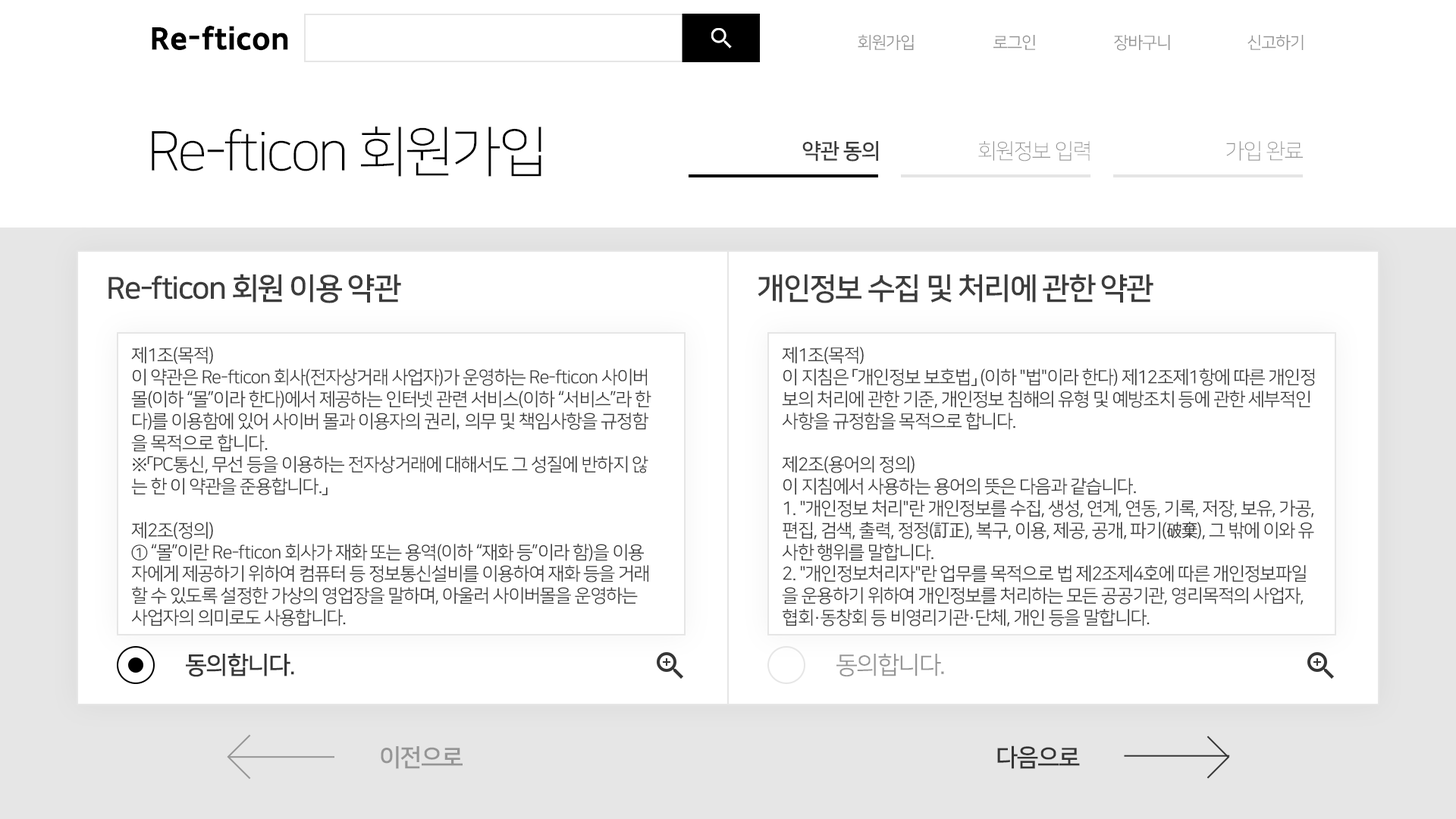
<style>
.page{position:relative;width:1456px;height:819px;background:#ffffff}
.page>*{position:absolute;margin:0}
.t1{font:30.3px "SDGothicNeoc-gExBd";color:#000000}
.t2{font:16.7px "NanumSquareOTFR";letter-spacing:-0.05em;color:#959595}
.t3{font:54.6px "NanumSquareOTFL";letter-spacing:-0.05em;color:#000000}
.t4{font:21.2px "NanumSquareOTFB";letter-spacing:-0.05em;color:#3c3c3c}
.t5{font:21.2px "NanumSquareOTFL";letter-spacing:-0.05em;color:#959595}
.t6{font:30.3px "NanumSquareOTFB";letter-spacing:-0.05em;color:#3c3c3c}
.t7{font:18.2px "NanumSquareOTFR";letter-spacing:-0.05em;color:#3c3c3c}
.t8{font:18.2px "AppleGothic";letter-spacing:-0.05em;color:#3c3c3c}
.t9{font:18.2px "NanumBarunGothic";letter-spacing:-0.05em;color:#3c3c3c}
.t10{font:24.3px "NanumSquareOTFB";letter-spacing:-0.05em;color:#353535}
.t11{font:24.3px "NanumSquareOTFR";letter-spacing:-0.05em;color:#959595}
.t12{font:24.3px "NanumSquareOTFB";letter-spacing:-0.05em;color:#959595}
.t13{font:24.4px "NanumSquareOTFB";letter-spacing:-0.05em;color:#353535}
</style>
<div class="page">
<p class="t1" style="left:152px;top:26px;width:136px;height:25px">Re-fticon</p>
<p class="t2" style="left:858px;top:34px;width:56px;height:16px">회원가입</p>
<p class="t2" style="left:993px;top:35px;width:42px;height:15px">로그인</p>
<p class="t2" style="left:1114px;top:35px;width:56px;height:16px">장바구니</p>
<p class="t2" style="left:1247px;top:35px;width:57px;height:15px">신고하기</p>
<p class="t3" style="left:152px;top:126px;width:389px;height:51px">Re-fticon 회원가입</p>
<p class="t4" style="left:802px;top:141px;width:76px;height:21px">약관 동의</p>
<p class="t5" style="left:978px;top:141px;width:112px;height:21px">회원정보 입력</p>
<p class="t5" style="left:1226px;top:141px;width:77px;height:20px">가입 완료</p>
<p class="t6" style="left:108px;top:274px;width:293px;height:29px">Re-fticon 회원 이용 약관</p>
<p class="t6" style="left:758px;top:274px;width:395px;height:29px">개인정보 수집 및 처리에 관한 약관</p>
<p class="t7" style="left:131px;top:347px;width:520px;height:279px">제1조(목적)<br>이 약관은 Re-fticon 회사(전자상거래 사업자)가 운영하는 Re-fticon 사이버<br>몰(이하 “몰”이라 한다)에서 제공하는 인터넷 관련 서비스(이하 “서비스”라 한<br>다)를 이용함에 있어 사이버 몰과 이용자의 권리<span class="t8">, </span>의무 및 책임사항을 규정함<br>을 목적으로 합니다.<br>※「PC통신, 무선 등을 이용하는 전자상거래에 대해서도 그 성질에 반하지 않<br>는 한 이 약관을 준용합니다.」<br><br>제2조(정의)<br>① “몰”이란 Re-fticon 회사가 재화 또는 용역(이하 “재화 등”이라 함)을 이용<br>자에게 제공하기 위하여 컴퓨터 등 정보통신설비를 이용하여 재화 등을 거래<br>할 수 있도록 설정한 가상의 영업장을 말하며, 아울러 사이버몰을 운영하는<br>사업자의 의미로도 사용합니다.</p>
<p class="t7" style="left:782px;top:347px;width:533px;height:280px">제1조(목적)<br>이 지침은 「개인정보 보호법」 (이하 "법"이라 한다) 제12조제1항에 따른 개인정<br>보의 처리에 관한 기준, 개인정보 침해의 유형 및 예방조치 등에 관한 세부적인<br>사항을 규정함을 목적으로 합니다.<br><br>제2조(용어의 정의)<br>이 지침에서 사용하는 용어의 뜻은 다음과 같습니다.<br>1. "개인정보 처리"란 개인정보를 수집, 생성, 연계, 연동, 기록, 저장, 보유, 가공,<br>편집, 검색, 출력, 정정(<span class="t9">訂正</span>), 복구, 이용, 제공, 공개, 파기(<span class="t9">破棄</span>), 그 밖에 이와 유<br>사한 행위를 말합니다.<br>2. "개인정보처리자"란 업무를 목적으로 법 제2조제4호에 따른 개인정보파일<br>을 운용하기 위하여 개인정보를 처리하는 모든 공공기관, 영리목적의 사업자,<br>협회·동창회 등 비영리기관·단체, 개인 등을 말합니다.</p>
<p class="t10" style="left:186px;top:653px;width:108px;height:24px">동의합니다.</p>
<p class="t11" style="left:836px;top:653px;width:108px;height:23px">동의합니다.</p>
<p class="t12" style="left:381px;top:746px;width:82px;height:23px">이전으로</p>
<p class="t13" style="left:997px;top:745px;width:83px;height:24px">다음으로</p>
</div>
